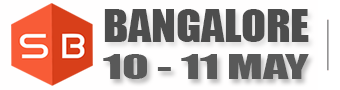
<style>
.page{position:relative;width:340px;height:90px;background:#fffefe}
.page>*{position:absolute;margin:0}
.t1{font:41.6px "Impact";color:#4d4d4d;scale:1.09 1}
.t2{font:31.8px "Impact";color:#595959;scale:1.56 1}
</style>
<div class="page">
<p class="t1" style="left:104px;top:9px;width:205px;height:33px">BANGALORE</p>
<p class="t2" style="left:103px;top:54px;width:206px;height:25px">10 - 11 MAY</p>
</div>
